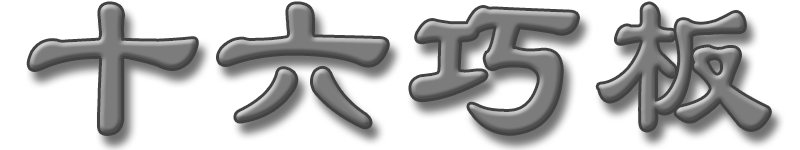
<style>
.page{position:relative;width:800px;height:150px;background:#ffffff}
.page>*{position:absolute;margin:0}
.t1{font:211.6px "FZLSK--GBK1-0";letter-spacing:0.1em;scale:0.82 1}
</style>
<div class="page">
<p class="t1" style="left:29px;top:4px;width:740px;height:129px">十六巧板</p>
</div>
